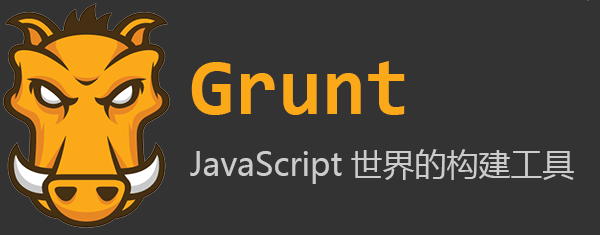
<style>
.page{position:relative;width:600px;height:235px;background:#333333}
.page>*{position:absolute;margin:0}
.t1{font:80px "Consolas-Bold";color:#fba919}
.t2{font:32px "MicrosoftYaHei";color:#cccccc}
</style>
<div class="page">
<p class="t1" style="left:191px;top:61px;width:214px;height:54px">Grunt</p>
<p class="t2" style="left:190px;top:149px;width:384px;height:35px">JavaScript世界的构建工具</p>
</div>
